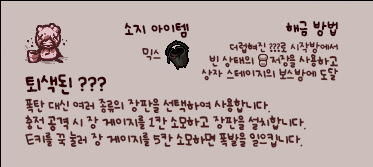
<style>
.page{position:relative;width:373px;height:167px;background:#ccbebb}
.page>*{position:absolute;margin:0}
.t1{font:12px "UhBeeSe_hyunBold";color:#2e0304}
.t2{font:12px "UhBeeSe_hyunBold";letter-spacing:-0.1em;color:#2e0304}
.t3{font:12px "UhBeeSe_hyunBold";letter-spacing:-0.15em;color:#2e0304}
.t4{font:10px/13px "UhBeeSe_hyunBold";letter-spacing:-0.025em;color:#4b1c1c}
.t5{font:9px/13px "UhBeeSe_hyunBold";letter-spacing:-0.025em;color:#4b1c1c}
.t6{font:10px/13px "UhBeeSe_hyunBold";letter-spacing:-0.15em;color:#4b1c1c}
.t7{font:10px "UhBeeSe_hyunBold";color:#4b1c1c}
.t8{font:11px/17px "UhBeeSe_hyunBold";letter-spacing:-0.05em;color:#4b1c1c}
.t9{font:15.2px/24px "UhBeeSe_hyunBold";letter-spacing:-0.1em;color:#2e0304;scale:1.05 1}
.t10{font:16px/24px "UhBeeSe_hyunBold";letter-spacing:-0.05em;color:#2e0304}
.t11{font:16px/24px "UhBeeSe_hyunBold";letter-spacing:-0.025em;color:#2e0304}
.t12{font:19px/26px "Font_soulsV2_Title-Regular";letter-spacing:-0.05em;color:#2e0304}
.t13{font:11px/17px "UhBeeSe_hyunBold";color:#4b1c1c}
.t14{font:11px/17px "UhBeeSe_hyunBold";letter-spacing:-0.15em;color:#4b1c1c}
</style>
<div class="page">
<p class="t1" style="left:124px;top:22px;width:65px;height:16px"><span class="t2">소</span>지 아이템</p>
<p class="t1" style="left:285px;top:20px;width:53px;height:17px">해금 방<span class="t3">법</span></p>
<p class="t4" style="left:202px;top:41px;width:137px;height:41px;text-align:right"><span class="t5">더럽혀진 ???로 시작방에서<br></span>빈 상태의    <span class="t6">저장</span>을 사용하고 <br>상자 스테이지의 보스방에 도달</p>
<p class="t7" style="left:142px;top:47px;width:19px;height:14px">믹스</p>
<p class="t8" style="left:25px;top:74px;width:281px;height:74px"><span class="t9">토</span><span class="t10">ㅣ</span><span class="t11">색</span><span class="t10">된 </span><span class="t12">???<br></span>폭탄 대신 여러 종류의 장판을 선택하여 사용합<span class="t13">니</span>다.<br>충전 공격 시 장 게이지를 1칸 소모하고 장판을 설치합<span class="t13">니</span>다.<br>E키를 꾹 눌러 장 게이지를 5칸 소모<span class="t14">하</span>면 폭발을 일으킵<span class="t13">니</span>다.</p>
</div>
